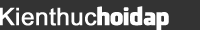
<style>
.page{position:relative;width:200px;height:30px;background:#333333}
.page>*{position:absolute;margin:0}
.t1{font:24px "ArialUnicodeMS";color:#ffffff;font-weight:bold}
.t2{font:24px "UTM-Facebook";color:#ffffff;font-weight:bold}
</style>
<div class="page">
<p class="t1" style="left:0px;top:6px;width:169px;height:25px">Kienthuc<span class="t2">hoidap</span></p>
</div>
